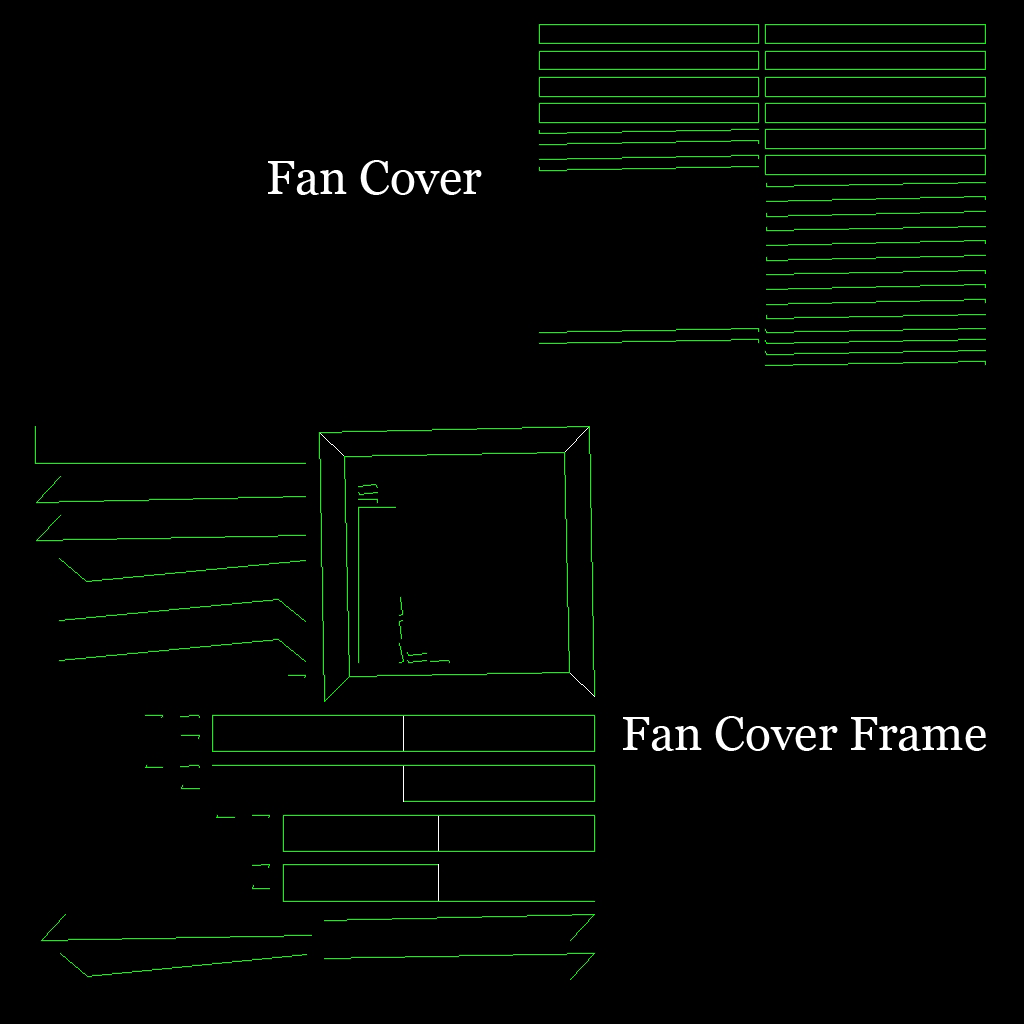
<style>
.page{position:relative;width:1024px;height:1024px;background:#000000}
.page>*{position:absolute;margin:0}
.t1{font:48px "Georgia";color:#ffffff}
</style>
<div class="page">
<p class="t1" style="left:268px;top:160px;width:214px;height:35px">Fan Cover</p>
<p class="t1" style="left:623px;top:716px;width:364px;height:35px">Fan Cover Frame</p>
</div>
